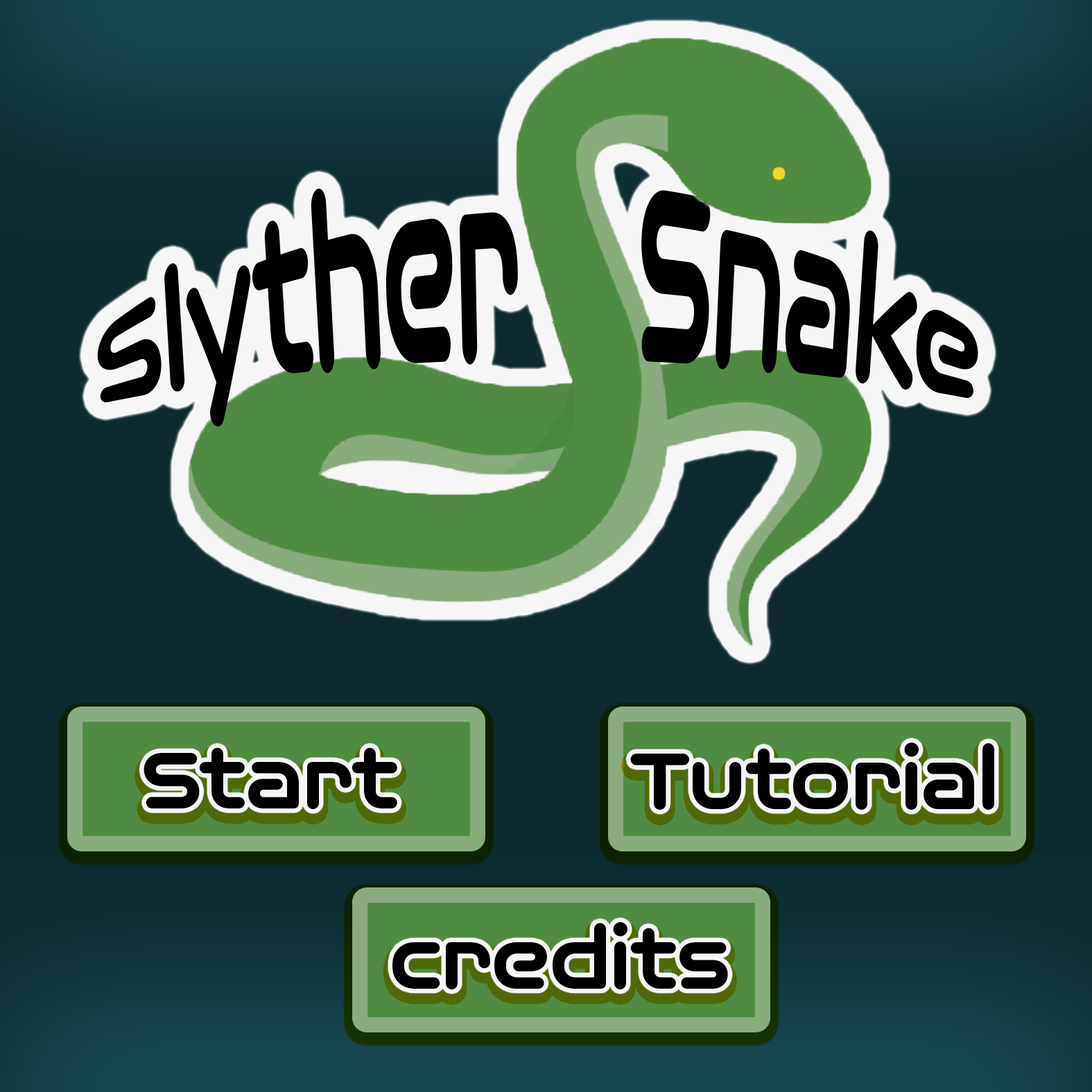
<style>
.page{position:relative;width:1092px;height:1092px;background:#0e2a2f}
.page>*{position:absolute;margin:0}
.t1{font:87.5px "OmniumWide-ExtraBold";color:#000000}
</style>
<div class="page">
<p class="t1" style="left:144px;top:747px;width:253px;height:62px">Start</p>
<p class="t1" style="left:630px;top:743px;width:364px;height:67px">Tutorial</p>
<p class="t1" style="left:392px;top:922px;width:336px;height:67px">credits</p>
</div>
